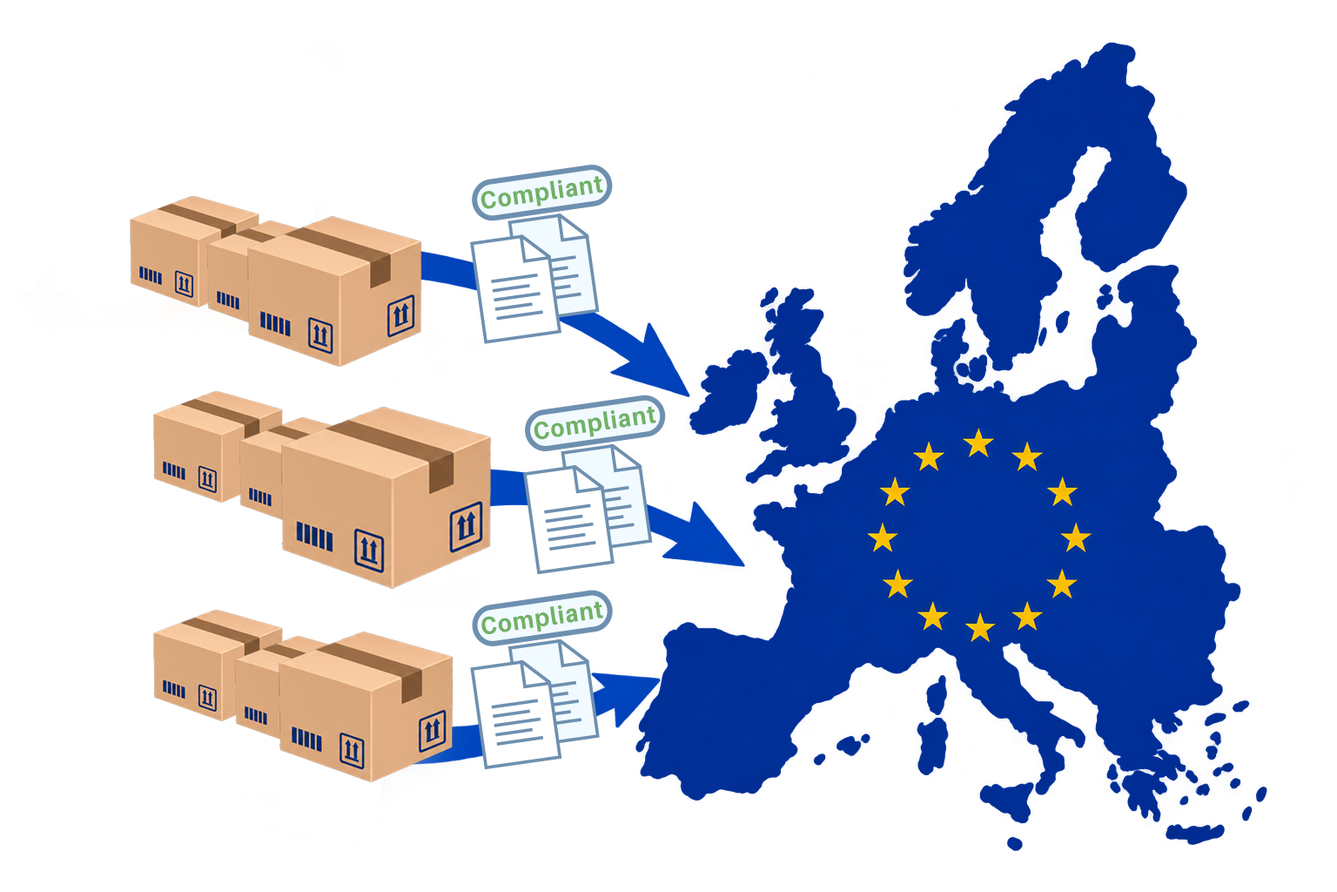
<style>
.page{position:relative;width:1337px;height:892px;background:#ffffff}
.page>*{position:absolute;margin:0}
.t1{font:24.8px "Aileron-Heavy";letter-spacing:0.05em;color:#7cae52;scale:0.91 1}
</style>
<div class="page">
<p class="t1" style="left:481px;top:176px;width:122px;height:33px;rotate:-8deg">Compliant</p>
<p class="t1" style="left:534px;top:406px;width:123px;height:34px;rotate:-8deg">Compliant</p>
<p class="t1" style="left:482px;top:601px;width:121px;height:33px;rotate:-8deg">Compliant</p>
</div>
